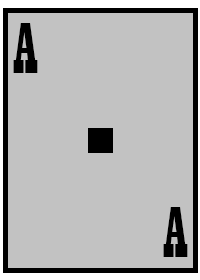
<style>
.page{position:relative;width:200px;height:280px;background:#c2c2c2}
.page>*{position:absolute;margin:0}
.t1{font:75px "Playbill";color:#000000}
</style>
<div class="page">
<p class="t1" style="left:13px;top:23px;width:25px;height:50px">A</p>
<p class="t1" style="left:163px;top:207px;width:25px;height:50px">A</p>
</div>
